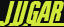
<style>
.page{position:relative;width:64px;height:27px;background:#d2e93a}
.page>*{position:absolute;margin:0}
.t1{font:28.3px "RadiumCorp";color:#d2e93a;scale:1.17 1}
</style>
<div class="page">
<p class="t1" style="left:0px;top:1px;width:65px;height:25px">JUGAR</p>
</div>
